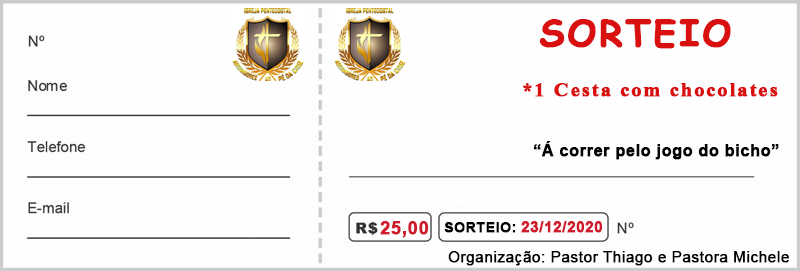
<style>
.page{position:relative;width:800px;height:271px;background:#fefefe}
.page>*{position:absolute;margin:0}
.t1{font:36px "ComicSansMS-Bold";letter-spacing:0.06em;color:#d91010;font-weight:bold}
.t2{font:25px "Aparajita-Bold";letter-spacing:0.06em;color:#d91010;font-weight:bold}
.t3{font:16px "Arial-BoldMT";letter-spacing:0.02em;color:#020202;font-weight:bold}
.t4{font:18px "Arial-BoldMT";letter-spacing:0.02em;color:#cf1c2d;font-weight:bold}
.t5{font:14px "Arial-BoldMT";letter-spacing:0.02em;color:#020202;font-weight:bold}
.t6{font:15px "Arial-BoldMT";letter-spacing:0.02em;color:#cf1c2d;font-weight:bold}
.t7{font:15px "ArialMT";letter-spacing:0.02em;color:#020202;font-weight:bold}
</style>
<div class="page">
<p class="t1" style="left:539px;top:19px;width:192px;height:30px">SORTEIO</p>
<p class="t2" style="left:523px;top:83px;width:255px;height:14px">*1 Cesta com chocolates</p>
<p class="t3" style="left:534px;top:141px;width:245px;height:19px">“Á correr pelo jogo do bicho”</p>
<p class="t4" style="left:380px;top:221px;width:49px;height:17px">25,00</p>
<p class="t5" style="left:444px;top:222px;width:72px;height:11px">SORTEIO:</p>
<p class="t6" style="left:521px;top:221px;width:81px;height:12px">23/12/2020</p>
<p class="t7" style="left:448px;top:251px;width:341px;height:15px">Organização: Pastor Thiago e Pastora Michele</p>
</div>
